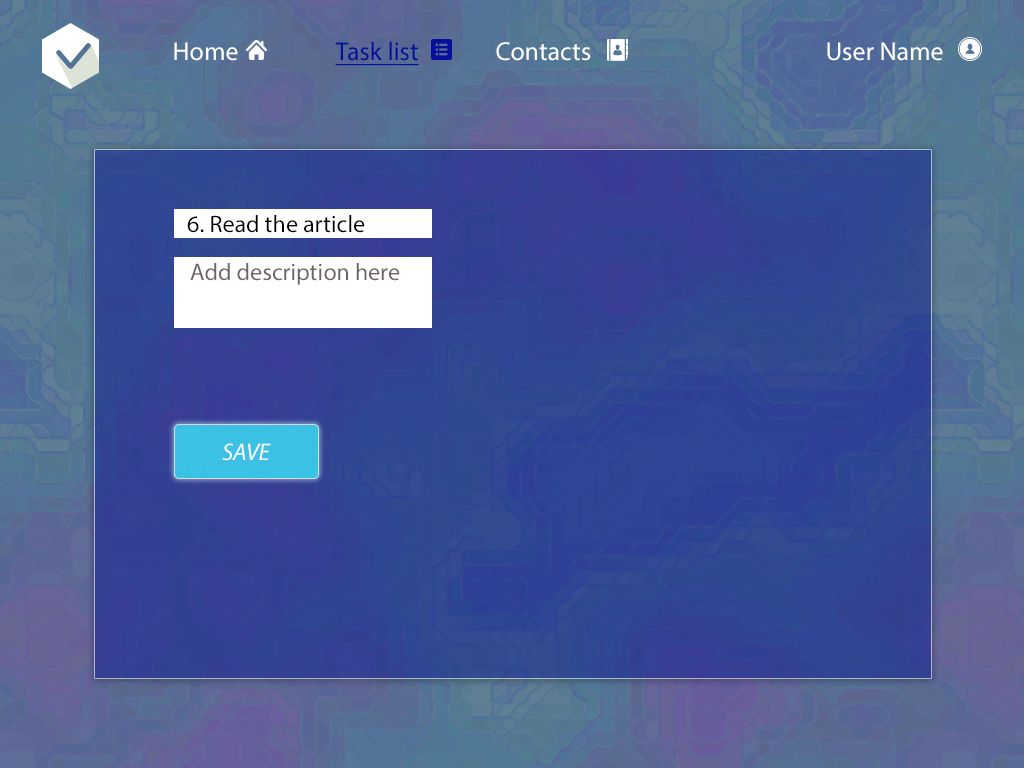
<style>
.page{position:relative;width:1024px;height:768px}
.page>*{position:absolute;margin:0}
.t1{font:26px "MyriadPro-Regular";color:#060e9a;text-decoration:underline}
.t2{font:26px "MyriadPro-Regular";color:#ffffff}
.t3{font:24px "MyriadPro-Regular";color:#000000}
.t4{font:24px "MyriadPro-Regular";color:#6c6363}
.t5{font:24px "MyriadPro-It";color:#ffffff}
</style>
<div class="page">
<p class="t1" style="left:335px;top:41px;width:84px;height:25px">Task list</p>
<p class="t2" style="left:174px;top:42px;width:64px;height:19px">Home</p>
<p class="t2" style="left:496px;top:42px;width:95px;height:19px">Contacts</p>
<p class="t2" style="left:827px;top:42px;width:116px;height:19px">User Name</p>
<p class="t3" style="left:187px;top:215px;width:178px;height:18px">6. Read the article</p>
<p class="t4" style="left:190px;top:263px;width:210px;height:22px">Add description here</p>
<p class="t5" style="left:222px;top:443px;width:49px;height:18px">SAVE</p>
</div>
